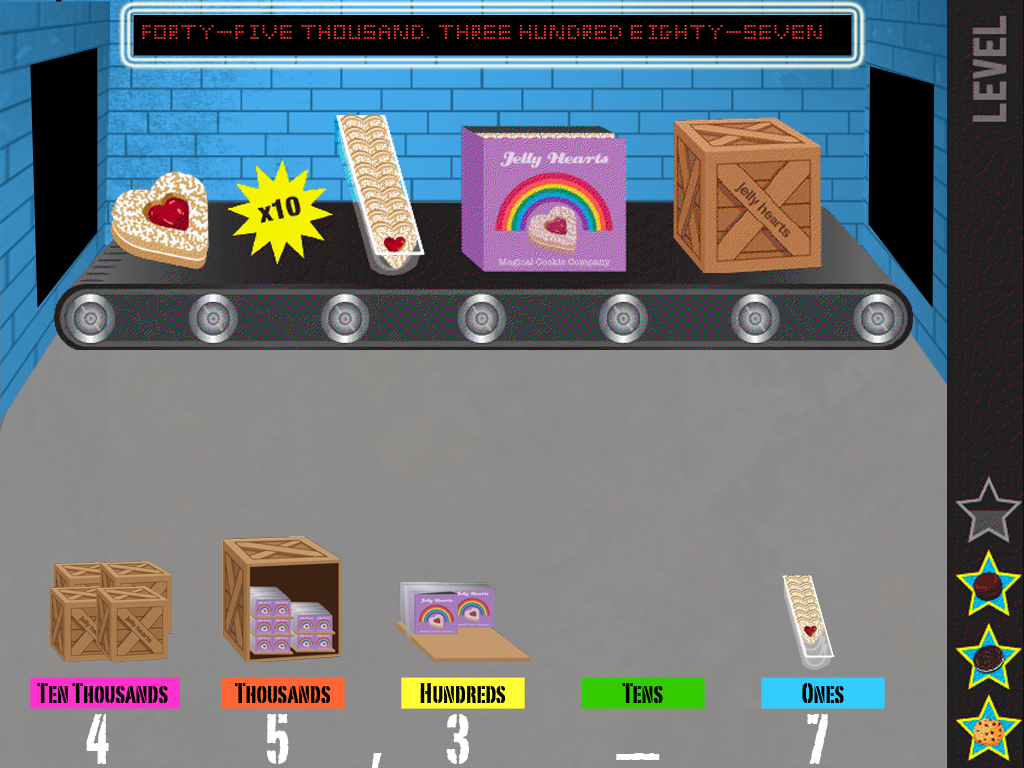
<style>
.page{position:relative;width:1024px;height:768px}
.page>*{position:absolute;margin:0}
.t1{font:24px "Eldora";color:#ff3333}
.t2{font:27.7px "PortagoITCTT";color:#000000}
.t3{font:68px "PortagoITCTT";color:#ffffff}
</style>
<div class="page">
<p class="t1" style="left:142px;top:25px;width:680px;height:14px">Forty-Five Thousand, Three Hundred eighty-seven</p>
<p class="t2" style="left:37px;top:683px;width:131px;height:20px">Ten Thousands</p>
<p class="t2" style="left:235px;top:683px;width:95px;height:20px">Thousands</p>
<p class="t2" style="left:420px;top:683px;width:85px;height:20px">Hundreds</p>
<p class="t2" style="left:622px;top:683px;width:41px;height:20px">Tens</p>
<p class="t2" style="left:802px;top:683px;width:42px;height:20px">Ones</p>
<p class="t3" style="left:86px;top:714px;width:23px;height:50px">4</p>
<p class="t3" style="left:266px;top:714px;width:23px;height:50px">5</p>
<p class="t3" style="left:446px;top:714px;width:23px;height:50px">3</p>
<p class="t3" style="left:807px;top:714px;width:21px;height:50px">7</p>
<p class="t3" style="left:371px;top:753px;width:11px;height:16px">,</p>
<p class="t3" style="left:616px;top:753px;width:44px;height:7px">—</p>
</div>
